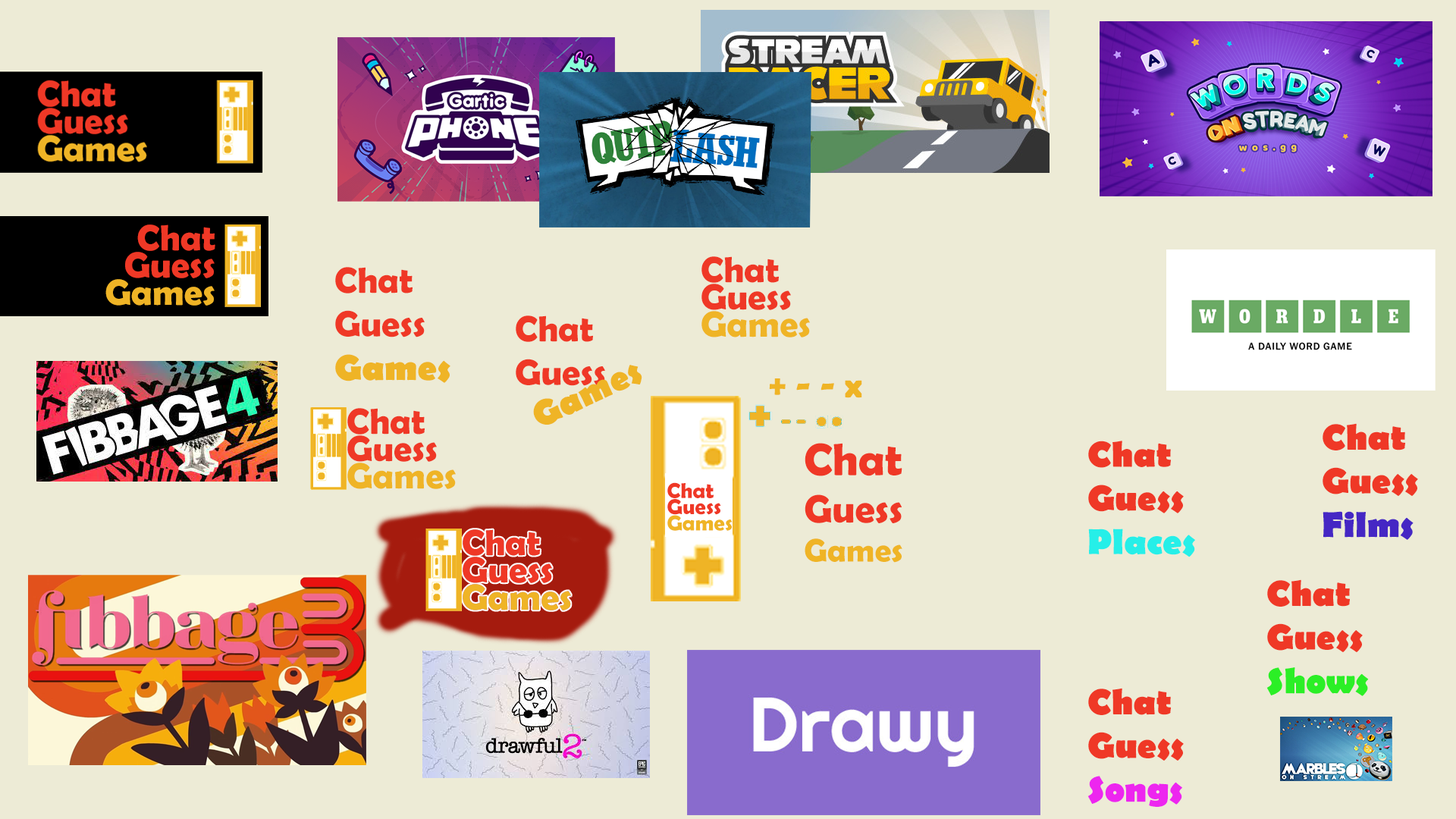
<style>
.page{position:relative;width:1456px;height:819px;background:#edebd6}
.page>*{position:absolute;margin:0}
.t1{font:36.4px/27.3px "BerlinSansFBDemi-Bold";color:#ef3826}
.t2{font:36.4px/27.3px "BerlinSansFBDemi-Bold";color:#efb426}
.t3{font:36.4px "BerlinSansFBDemi-Bold";color:#ef3826}
.t4{font:36.4px "BerlinSansFB-Bold";color:#efb426}
.t5{font:36.4px "BerlinSansFBDemi-Bold";color:#efb426}
.t6{font:36.4px "BerlinSansFB-Bold";color:#ef3826}
.t7{font:36.4px "BerlinSansFB-Bold";color:#4527c4}
.t8{font:39.4px "BerlinSansFBDemi-Bold";color:#ef3826}
.t9{font:45.5px "BerlinSansFBDemi-Bold";color:#ef3826}
.t10{font:32.6px "BerlinSansFBDemi-Bold";color:#efb426}
.t11{font:36.4px "BerlinSansFB-Bold";color:#26efe8}
.t12{font:21.6px/16.2px "BerlinSansFBDemi-Bold";color:#ef3826}
.t13{font:21.6px/16.2px "BerlinSansFBDemi-Bold";color:#efb426}
.t14{font:36.4px "BerlinSansFB-Bold";color:#2bef26}
.t15{font:36.4px "BerlinSansFB-Bold";color:#ed26ef}
</style>
<div class="page">
<p class="t1" style="left:105px;top:224px;width:110px;height:82px;text-align:right">Chat<br>Guess<br><span class="t2">Games</span></p>
<p class="t1" style="left:701px;top:256px;width:109px;height:81px">Chat<br>Guess<br><span class="t2">Games</span></p>
<p class="t3" style="left:335px;top:267px;width:115px;height:116px">Chat<br>Guess<br><span class="t4">Games</span></p>
<p class="t3" style="left:516px;top:315px;width:89px;height:71px">Chat<br>Guess</p>
<p class="t4" style="left:533px;top:365px;width:109px;height:60px;rotate:-25deg">Games</p>
<p class="t5" style="left:769px;top:378px;width:93px;height:20px"><span class="t3"><br></span><br>+ - - x</p>
<p class="t1" style="left:347px;top:408px;width:109px;height:81px">Chat<br>Guess<br><span class="t2">Games</span></p>
<p class="t6" style="left:1323px;top:423px;width:95px;height:117px">Chat<br>Guess<br><span class="t7">Films</span></p>
<p class="t8" style="left:805px;top:443px;width:97px;height:120px"><span class="t9">Chat<br></span>Guess<br><span class="t10">Games</span></p>
<p class="t6" style="left:1088px;top:441px;width:107px;height:116px">Chat<br>Guess<br><span class="t11">Places</span></p>
<p class="t12" style="left:667px;top:482px;width:66px;height:49px">Chat<br>Guess<br><span class="t13">Games</span></p>
<p class="t6" style="left:1266px;top:579px;width:103px;height:117px">Chat<br>Guess<br><span class="t14">Shows</span></p>
<p class="t6" style="left:1087px;top:688px;width:97px;height:119px">Chat<br>Guess<br><span class="t15">Songs</span></p>
</div>
